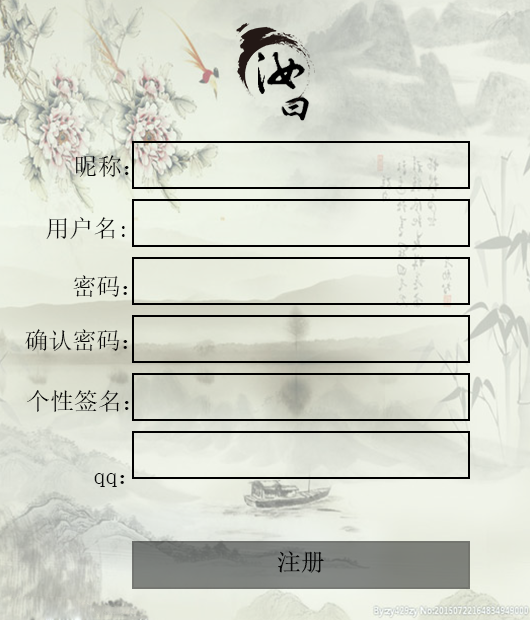
<style>
.page{position:relative;width:530px;height:620px}
.page>*{position:absolute;margin:0}
.t1{font:24px "SimSun";color:#070707}
</style>
<div class="page">
<p class="t1" style="left:76px;top:155px;width:53px;height:22px">昵称：</p>
<p class="t1" style="left:46px;top:217px;width:79px;height:22px">用户名:</p>
<p class="t1" style="left:73px;top:275px;width:55px;height:22px">密码：</p>
<p class="t1" style="left:25px;top:329px;width:103px;height:22px">确认密码：</p>
<p class="t1" style="left:27px;top:390px;width:102px;height:22px">个性签名：</p>
<p class="t1" style="left:94px;top:473px;width:31px;height:14px">qq：</p>
<p class="t1" style="left:277px;top:551px;width:47px;height:22px">注册</p>
</div>
